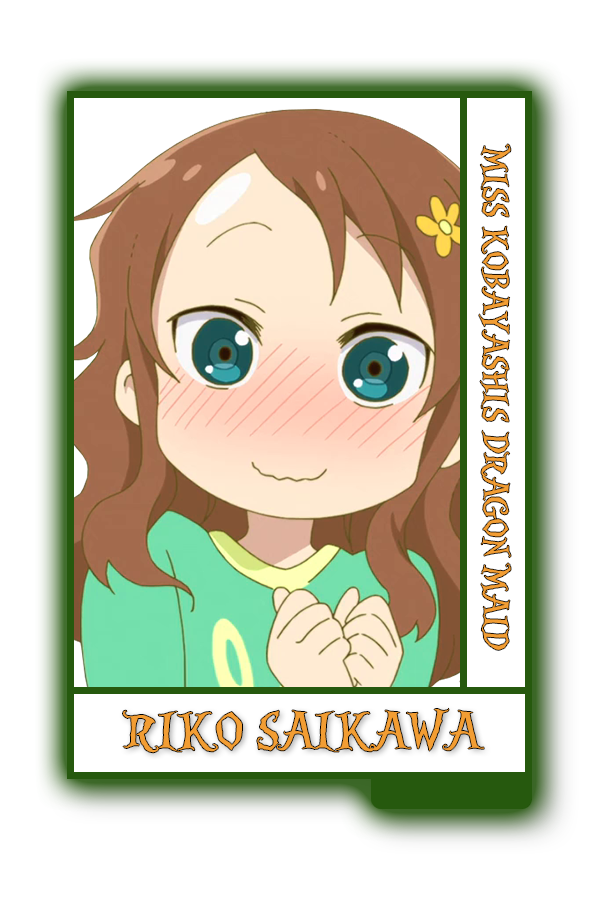
<style>
.page{position:relative;width:600px;height:900px;background:#ffffff}
.page>*{position:absolute;margin:0}
.t1{font:37.3px "AliceinWonderland";color:#f29d33}
.t2{font:56px "AliceinWonderland";color:#f29d33}
</style>
<div class="page">
<p class="t1" style="left:479px;top:144px;width:32px;height:506px;rotate:90deg">MISS KOBAYASHIS DRAGON MAID</p>
<p class="t2" style="left:123px;top:708px;width:361px;height:45px">RIKO SAIKAWA</p>
</div>
